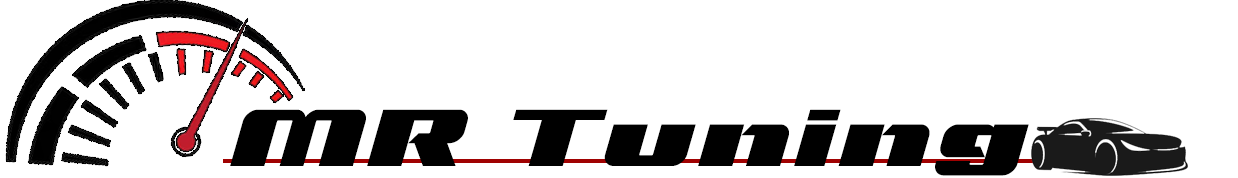
<style>
.page{position:relative;width:1238px;height:178px;background:#ffffff}
.page>*{position:absolute;margin:0}
.t1{font:80px "TypoSpeedBlackDemo-Italic";letter-spacing:0.05em;color:#000000}
</style>
<div class="page">
<p class="t1" style="left:230px;top:109px;width:799px;height:67px">MR Tuning</p>
</div>
